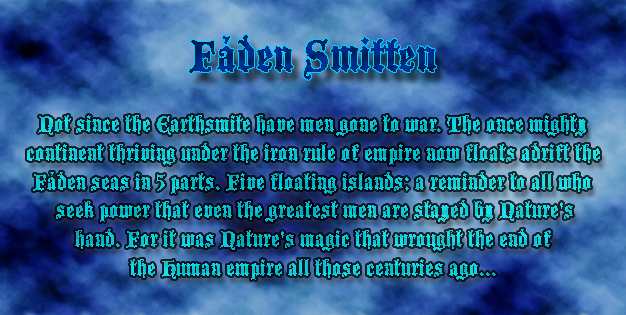
<style>
.page{position:relative;width:626px;height:315px}
.page>*{position:absolute;margin:0}
.t1{font:48px "BlackmoorLetPlain"}
.t2{font:24px "BlackmoorLetPlain";color:#0ac9d5}
</style>
<div class="page">
<p class="t1" style="left:189px;top:35px;width:247px;height:45px">Fáden Smitten</p>
<p class="t2" style="left:27px;top:115px;width:573px;height:165px;text-align:center">Not since the Earthsmite have men gone to war. The once mighty<br>continent thriving under the iron rule of empire now floats adrift the<br>Fáden seas in 5 parts. Five floating islands; a reminder to all who<br> seek power that even the greatest men are stayed by Nature's<br>hand. For it was Nature's magic that wrought the end of<br>the Human empire all those centuries ago...</p>
</div>
